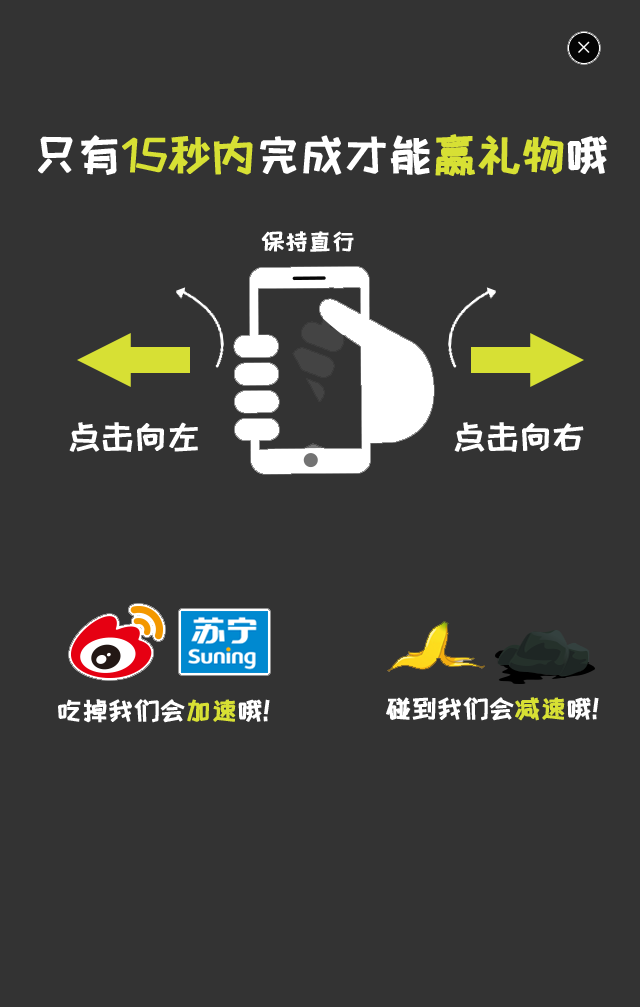
<style>
.page{position:relative;width:640px;height:1007px;background:#333333}
.page>*{position:absolute;margin:0}
.t1{font:45.3px "HappyZcool-2016";letter-spacing:-0.05em;color:#d7e034;font-weight:bold}
.t2{font:45.3px "HappyZcool-2016";letter-spacing:-0.05em;color:#ffffff;font-weight:bold}
.t3{font:24px "HappyZcool-2016";letter-spacing:-0.05em;color:#ffffff;font-weight:bold}
.t4{font:33.9px "HappyZcool-2016";letter-spacing:-0.05em;color:#ffffff;font-weight:bold}
.t5{font:26.4px "HappyZcool-2016";letter-spacing:-0.05em;color:#ffffff;font-weight:bold}
.t6{font:26.4px "HappyZcool-2016";letter-spacing:-0.05em;color:#d7e034;font-weight:bold}
</style>
<div class="page">
<p class="t1" style="left:38px;top:134px;width:569px;height:42px"><span class="t2">只有</span>15秒内<span class="t2">完成才能</span>赢礼物<span class="t2">哦</span></p>
<p class="t3" style="left:261px;top:231px;width:93px;height:21px">保持直行</p>
<p class="t4" style="left:69px;top:422px;width:129px;height:30px">点击向左</p>
<p class="t4" style="left:454px;top:422px;width:130px;height:30px">点击向右</p>
<p class="t5" style="left:58px;top:699px;width:212px;height:24px">吃掉我们会<span class="t6">加速</span>哦！</p>
<p class="t5" style="left:386px;top:697px;width:213px;height:24px">碰到我们会<span class="t6">减速</span>哦！</p>
</div>
